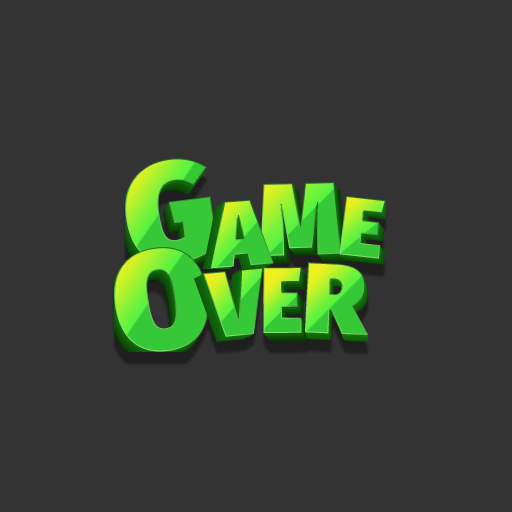
<style>
.page{position:relative;width:512px;height:512px;background:#333333}
.page>*{position:absolute;margin:0}
.t1{font:140.3px "FiraSans-Ultra"}
.t2{font:102.9px "FiraSans-Ultra"}
.t3{font:84.2px "FiraSans-Ultra"}
.t4{font:93.5px "FiraSans-Ultra"}
.t5{font:94.2px "FiraSans-Ultra";scale:0.86 1}
.t6{font:99.9px "FiraSans-Ultra"}
</style>
<div class="page">
<p class="t1" style="left:125px;top:158px;width:93px;height:106px;rotate:-8deg">G</p>
<p class="t2" style="left:260px;top:182px;width:82px;height:74px;rotate:-2deg">M</p>
<p class="t3" style="left:339px;top:196px;width:47px;height:63px;rotate:6deg">E</p>
<p class="t4" style="left:211px;top:199px;width:63px;height:70px;rotate:-5deg">A</p>
<p class="t1" style="left:114px;top:247px;width:95px;height:105px;rotate:-9deg">O</p>
<p class="t4" style="left:202px;top:267px;width:62px;height:70px;rotate:-5deg">V</p>
<p class="t5" style="left:263px;top:267px;width:39px;height:66px">E</p>
<p class="t6" style="left:305px;top:262px;width:63px;height:73px;rotate:3deg">R</p>
</div>
